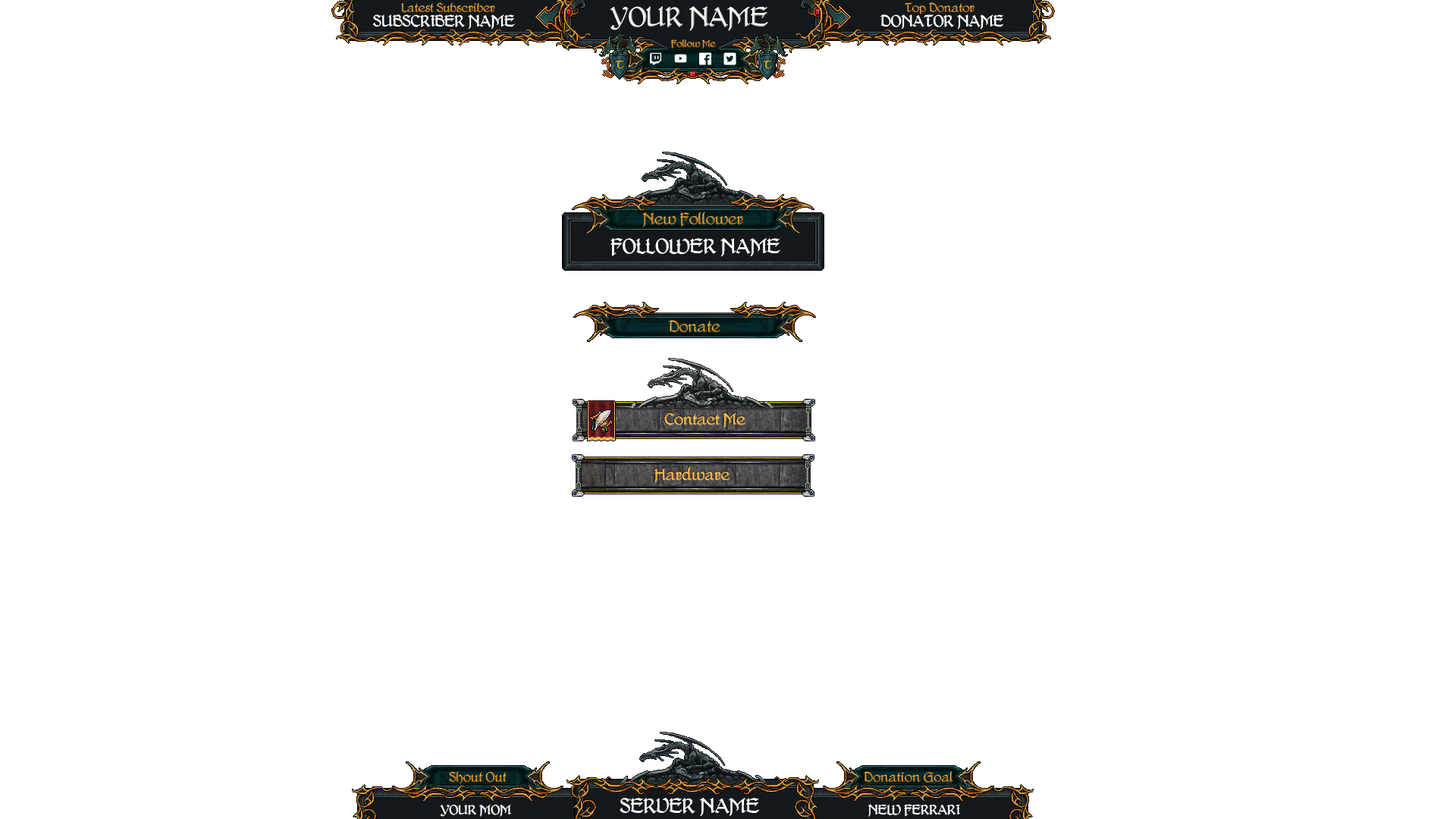
<style>
.page{position:relative;width:1456px;height:819px;background:#ffffff}
.page>*{position:absolute;margin:0}
.t1{font:11.1px "DelitschAntiqua"}
.t2{font:14.2px "DelitschAntiqua";color:#ffffff}
.t3{font:24.3px "DelitschAntiqua";color:#ffffff}
.t4{font:8.5px "DelitschAntiqua"}
.t5{font:14.2px "DelitschAntiqua"}
.t6{font:18.2px "DelitschAntiqua";color:#ffffff}
.t7{font:14.2px "DelitschAntiqua";color:#feb747}
.t8{font:14.2px "DelitschAntiqua";color:#feb748}
.t9{font:12.1px "DelitschAntiqua"}
.t10{font:11.8px "DelitschAntiqua";color:#ffffff}
.t11{font:12.1px "DelitschAntiqua";color:#ffffff}
</style>
<div class="page">
<p class="t1" style="left:401px;top:2px;width:94px;height:11px">Latest Subscriber</p>
<p class="t1" style="left:905px;top:2px;width:70px;height:12px">Top Donator</p>
<p class="t2" style="left:373px;top:14px;width:142px;height:16px">SUBSCRIBER NAME</p>
<p class="t3" style="left:610px;top:6px;width:158px;height:25px">YOUR NAME</p>
<p class="t2" style="left:880px;top:14px;width:123px;height:16px">DONATOR NAME</p>
<p class="t4" style="left:671px;top:39px;width:45px;height:10px">Follow Me</p>
<p class="t5" style="left:642px;top:212px;width:101px;height:15px">New Follower</p>
<p class="t6" style="left:610px;top:238px;width:170px;height:19px">FOLLOWER NAME</p>
<p class="t5" style="left:669px;top:320px;width:51px;height:13px">Donate</p>
<p class="t7" style="left:664px;top:413px;width:81px;height:15px">Contact Me</p>
<p class="t8" style="left:654px;top:466px;width:76px;height:16px">Hardware</p>
<p class="t9" style="left:449px;top:771px;width:58px;height:13px">Shout Out</p>
<p class="t9" style="left:864px;top:771px;width:89px;height:12px">Donation Goal</p>
<p class="t6" style="left:620px;top:798px;width:139px;height:19px">SERVER NAME</p>
<p class="t10" style="left:440px;top:805px;width:71px;height:12px">YOUR MOM</p>
<p class="t11" style="left:868px;top:804px;width:92px;height:13px">NEW FERRARI</p>
</div>
